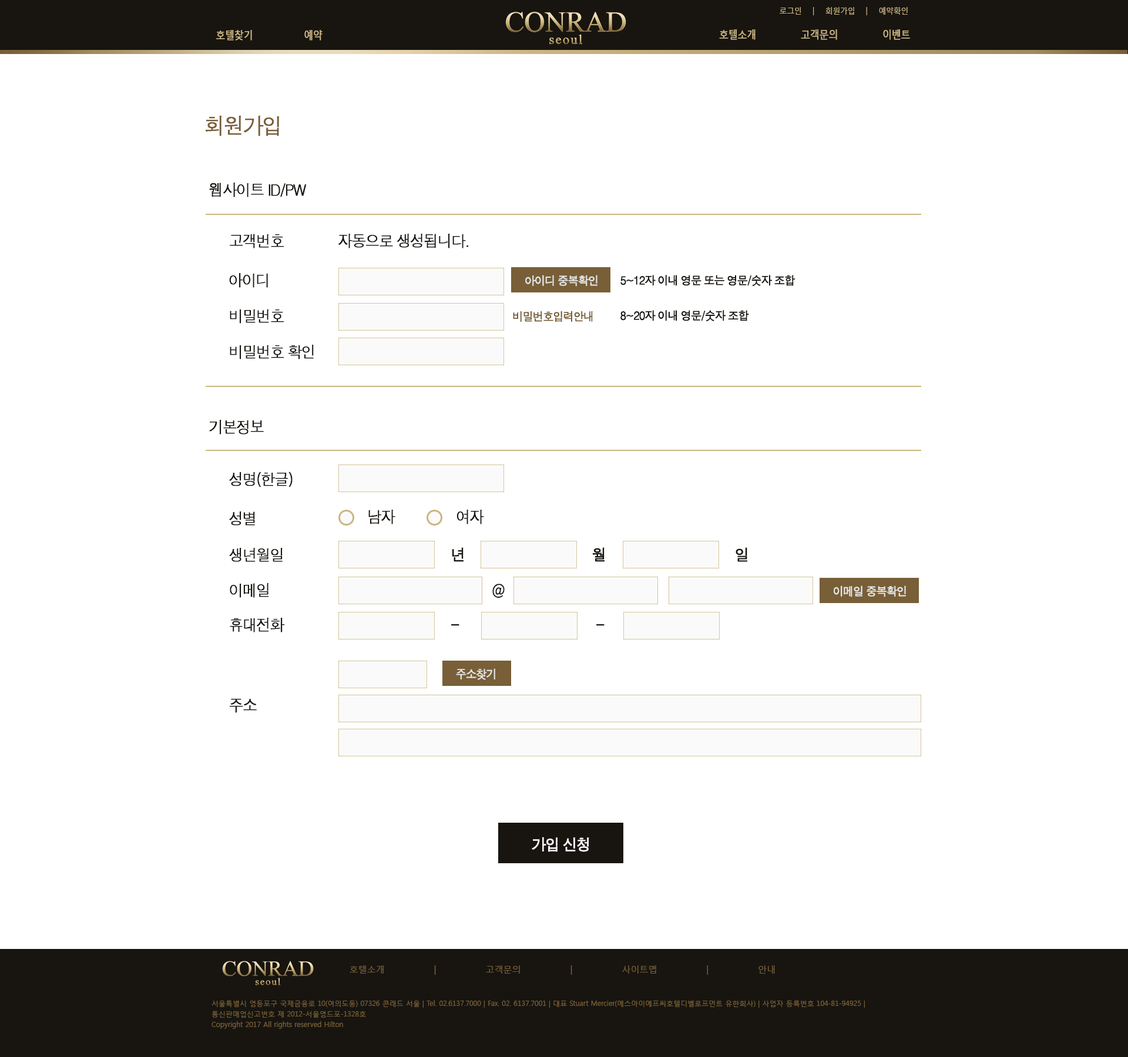
<style>
.page{position:relative;width:1128px;height:1057px;background:#ffffff}
.page>*{position:absolute;margin:0}
.t1{font:8.2px "MalgunGothicRegular";color:#cbb682;scale:0.9 1}
.t2{font:10.6px "MalgunGothicRegular";letter-spacing:-0.05em;color:#cbb682;font-weight:bold;scale:0.9 1}
.t3{font:22.3px "Dotum";letter-spacing:-0.1em;color:#785f37;font-weight:bold;scale:0.93 1}
.t4{font:15.9px "Dotum";letter-spacing:-0.1em;color:#181510;font-weight:bold;scale:0.93 1}
.t5{font:11.7px "Dotum";letter-spacing:-0.1em;color:#e6e6e6;font-weight:bold;scale:0.93 1}
.t6{font:11.7px "Dotum";letter-spacing:-0.1em;color:#181510;font-weight:bold;scale:0.93 1}
.t7{font:11.7px "Dotum";letter-spacing:-0.1em;color:#785f37;font-weight:bold;scale:0.93 1}
.t8{font:15.9px "Dotum";letter-spacing:-0.1em;color:#181510;font-weight:bold;scale:0.81 1}
.t9{font:15.9px "Dotum";letter-spacing:-0.1em;color:#fafafa;font-weight:bold;scale:0.93 1}
.t10{font:8.8px "MalgunGothicRegular";color:#785f37}
.t11{font:7px/10.6px "MalgunGothicRegular";color:#785f37}
</style>
<div class="page">
<p class="t1" style="left:779px;top:7px;width:129px;height:8px">로그인 | 회원가입 | 예약확인</p>
<p class="t2" style="left:216px;top:30px;width:36px;height:11px">호텔찾기</p>
<p class="t2" style="left:304px;top:30px;width:18px;height:11px">예약</p>
<p class="t2" style="left:719px;top:29px;width:191px;height:11px">호텔소개 고객문의 이벤트</p>
<p class="t3" style="left:205px;top:116px;width:74px;height:20px">회원가입</p>
<p class="t4" style="left:209px;top:183px;width:98px;height:14px">웹사이트 ID/PW</p>
<p class="t4" style="left:230px;top:234px;width:54px;height:14px">고객번호</p>
<p class="t4" style="left:338px;top:234px;width:130px;height:14px">자동으로 생성됩니다.</p>
<p class="t4" style="left:229px;top:273px;width:39px;height:15px">아이디</p>
<p class="t5" style="left:525px;top:275px;width:72px;height:12px">아이디 중복확인</p>
<p class="t6" style="left:620px;top:275px;width:175px;height:12px">5~12자 이내 영문 또는 영문/숫자 조합</p>
<p class="t4" style="left:230px;top:310px;width:54px;height:14px">비밀번호</p>
<p class="t7" style="left:513px;top:311px;width:80px;height:11px">비밀번호입력안내</p>
<p class="t6" style="left:620px;top:310px;width:129px;height:12px">8~20자 이내 영문/숫자 조합</p>
<p class="t4" style="left:230px;top:345px;width:84px;height:14px">비밀번호 확인</p>
<p class="t4" style="left:209px;top:420px;width:55px;height:15px">기본정보</p>
<p class="t4" style="left:229px;top:472px;width:64px;height:16px">성명(한글)</p>
<p class="t4" style="left:368px;top:510px;width:27px;height:15px">남자</p>
<p class="t4" style="left:456px;top:510px;width:28px;height:15px">여자</p>
<p class="t4" style="left:229px;top:512px;width:26px;height:14px">성별</p>
<p class="t4" style="left:229px;top:548px;width:54px;height:14px">생년월일</p>
<p class="t4" style="left:452px;top:547px;width:11px;height:15px">년</p>
<p class="t4" style="left:592px;top:547px;width:12px;height:15px">월</p>
<p class="t4" style="left:735px;top:547px;width:12px;height:15px">일</p>
<p class="t4" style="left:230px;top:583px;width:39px;height:15px">이메일</p>
<p class="t8" style="left:492px;top:584px;width:13px;height:14px">@</p>
<p class="t5" style="left:834px;top:586px;width:72px;height:11px">이메일 중복확인</p>
<p class="t4" style="left:230px;top:618px;width:55px;height:15px">휴대전화</p>
<p class="t4" style="left:451px;top:624px;width:8px;height:2px">-</p>
<p class="t4" style="left:596px;top:624px;width:8px;height:2px">-</p>
<p class="t5" style="left:456px;top:668px;width:39px;height:12px">주소찾기</p>
<p class="t4" style="left:229px;top:699px;width:28px;height:14px">주소</p>
<p class="t9" style="left:532px;top:837px;width:57px;height:15px">가입 신청</p>
<p class="t10" style="left:349px;top:966px;width:426px;height:9px">호텔소개 | 고객문의 | 사이트맵 | 안내</p>
<p class="t11" style="left:211px;top:1000px;width:654px;height:29px">서울특별시 영등포구 국제금융로 10(여의도동) 07326 콘래드 서울 | Tel. 02.6137.7000 | Fax. 02. 6137.7001 | 대표 Stuart Mercier(에스아이에프씨호텔디벨로프먼트 유한회사) | 사업자 등록번호 104-81-94925 | 통신판매업신고번호 제 2012-서울영드포-1328호<br>Copyright 2017 All rights reserved Hilton</p>
</div>
